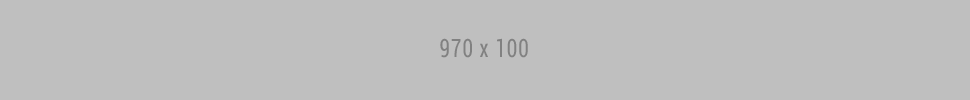
<style>
.page{position:relative;width:970px;height:100px;background:#bfbfbf}
.page>*{position:absolute;margin:0}
.t1{font:25px "Roboto-Condensed";letter-spacing:0.07em;color:#818181;scale:0.8 1}
</style>
<div class="page">
<p class="t1" style="left:440px;top:38px;width:88px;height:20px">970 x 100</p>
</div>
